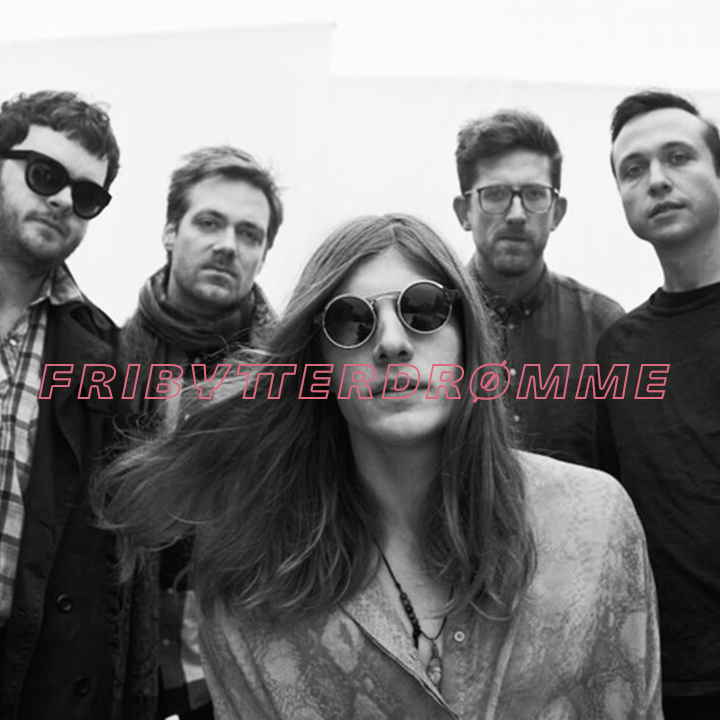
<style>
.page{position:relative;width:720px;height:720px}
.page>*{position:absolute;margin:0}
.t1{font:50px "Majoris-Italic";letter-spacing:0.1em;text-transform:uppercase}
</style>
<div class="page">
<p class="t1" style="left:38px;top:360px;width:632px;height:43px">fribytterdrømme</p>
</div>
